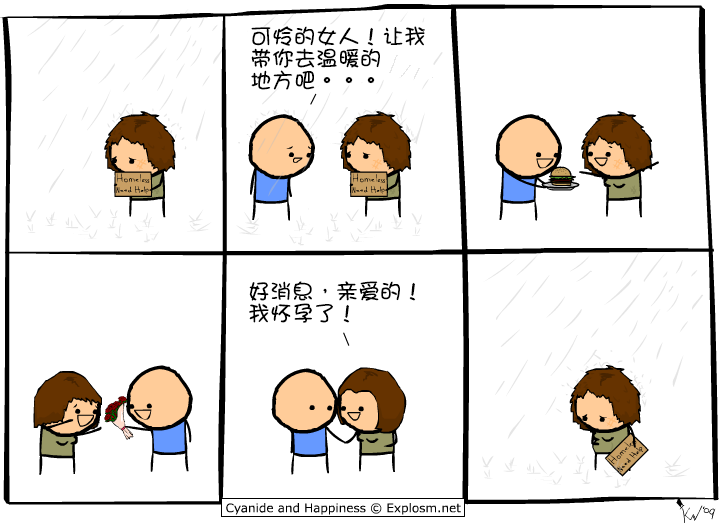
<style>
.page{position:relative;width:720px;height:525px;background:#ffffff}
.page>*{position:absolute;margin:0}
.t1{font:22px/22px "DFGirl";color:#000000}
</style>
<div class="page">
<p class="t1" style="left:251px;top:26px;width:174px;height:64px">可怜的女人！让我<br>带你去温暖的<br>地方吧。。。</p>
<p class="t1" style="left:249px;top:281px;width:167px;height:42px">好消息，亲爱的！<br>我怀孕了！</p>
</div>
